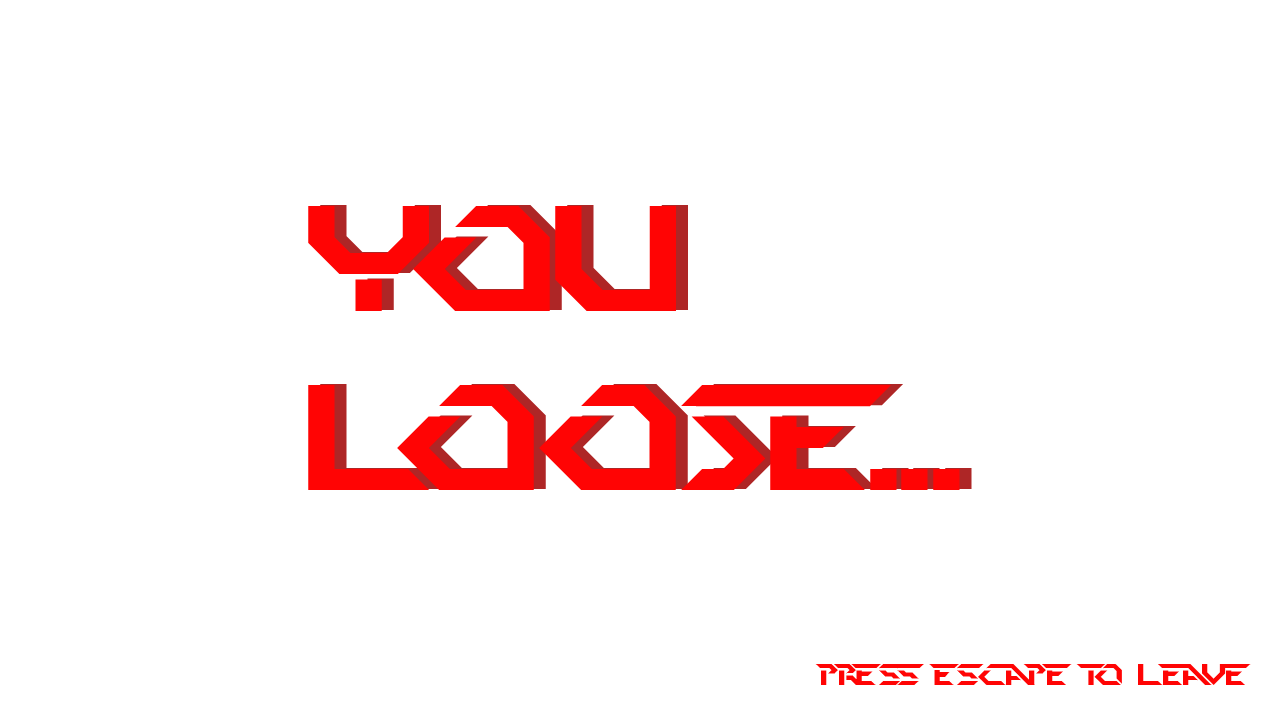
<style>
.page{position:relative;width:1280px;height:720px;background:#ffffff}
.page>*{position:absolute;margin:0}
.t1{font:150px "PerfectDark(BRK)";color:#ff0404}
.t2{font:30px "PerfectDark(BRK)";color:#ff0404}
</style>
<div class="page">
<p class="t1" style="left:308px;top:206px;width:652px;height:284px">YOU<br>LOOSE...</p>
<p class="t1" style="left:320px;top:205px;width:652px;height:284px">YOU<br>LOOSE...</p>
<p class="t2" style="left:815px;top:664px;width:436px;height:21px">Press Escape to leave</p>
</div>
